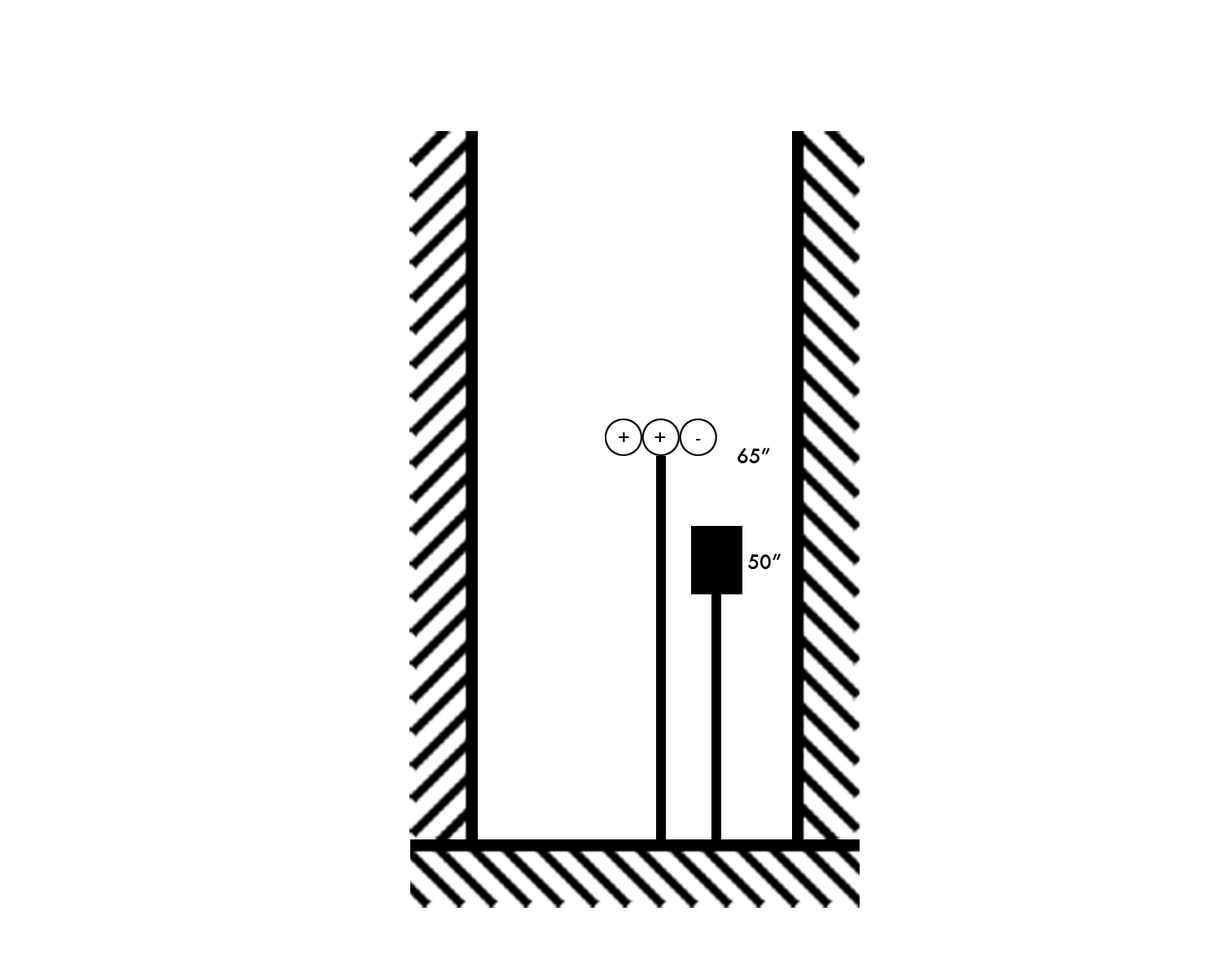
<style>
.page{position:relative;width:1221px;height:977px;background:#ffffff}
.page>*{position:absolute;margin:0}
.t1{font:19.5px "Futura-Medium";color:#000000}
</style>
<div class="page">
<p class="t1" style="left:619px;top:432px;width:82px;height:10px">+    +     -</p>
<p class="t1" style="left:737px;top:448px;width:33px;height:15px">65”</p>
<p class="t1" style="left:748px;top:553px;width:33px;height:16px">50”</p>
</div>
